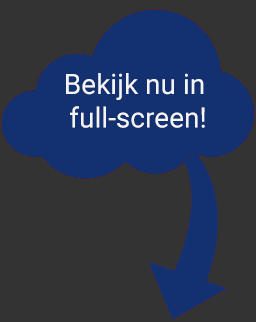
<style>
.page{position:relative;width:256px;height:322px;background:#333333}
.page>*{position:absolute;margin:0}
.t1{font:28.1px "Roboto-Regular";color:#f5f5f5}
</style>
<div class="page">
<p class="t1" style="left:66px;top:73px;width:139px;height:55px;text-align:center">Bekijk nu in <br>full-screen!</p>
</div>
